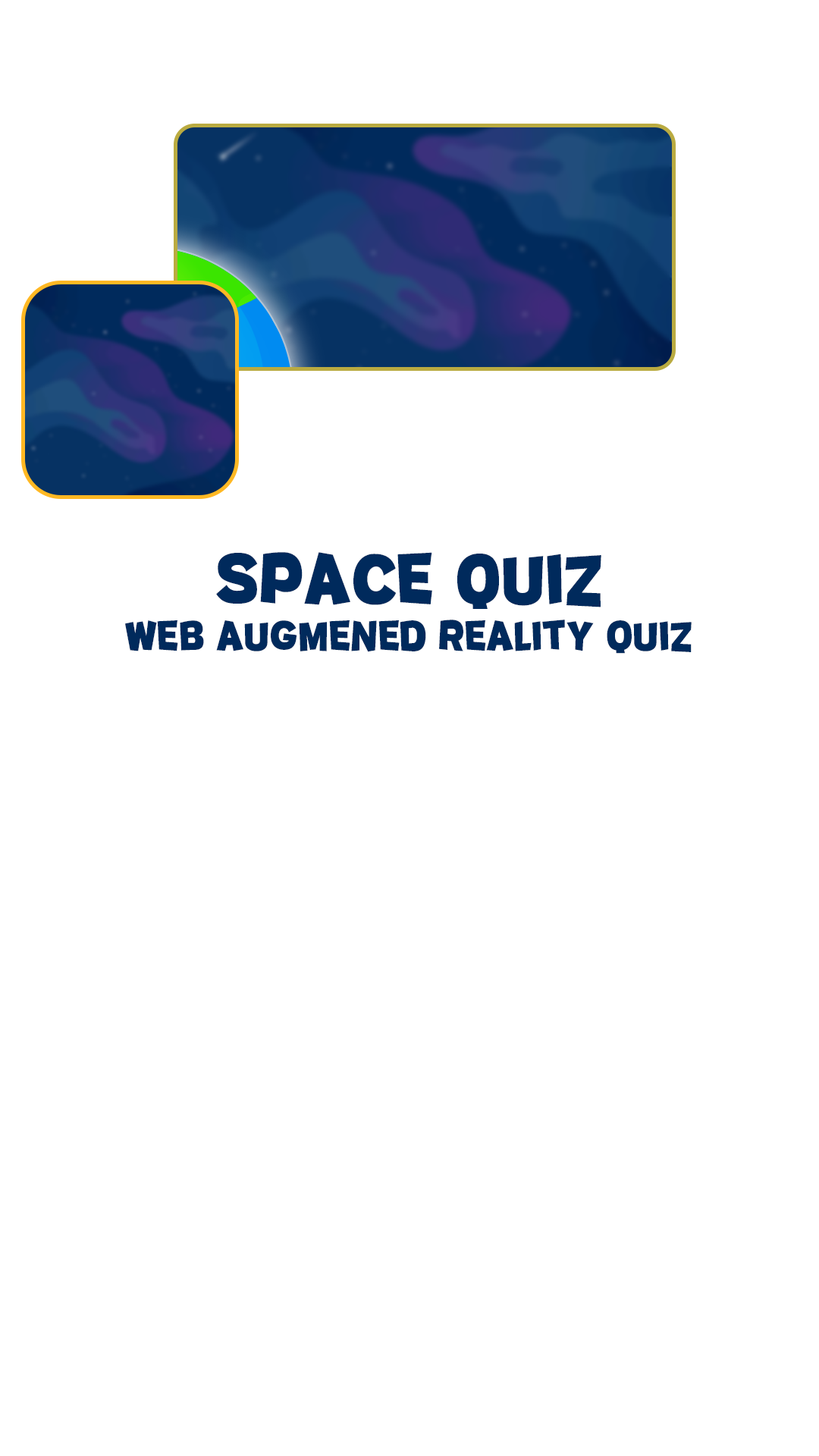
<style>
.page{position:relative;width:819px;height:1456px;background:#ffffff}
.page>*{position:absolute;margin:0}
.t1{font:47.2px/44.6px "Potato_sans-Bold";letter-spacing:0.05em;color:#002a5c;scale:0.89 1}
.t2{font:80.4px/93.3px "Potato_sans-Bold";letter-spacing:0.05em;color:#002a5c;scale:0.89 1}
</style>
<div class="page">
<p class="t1" style="left:125px;top:552px;width:567px;height:102px;text-align:center"><span class="t2">Space quiz<br></span>Web augmened reality quiz</p>
</div>
